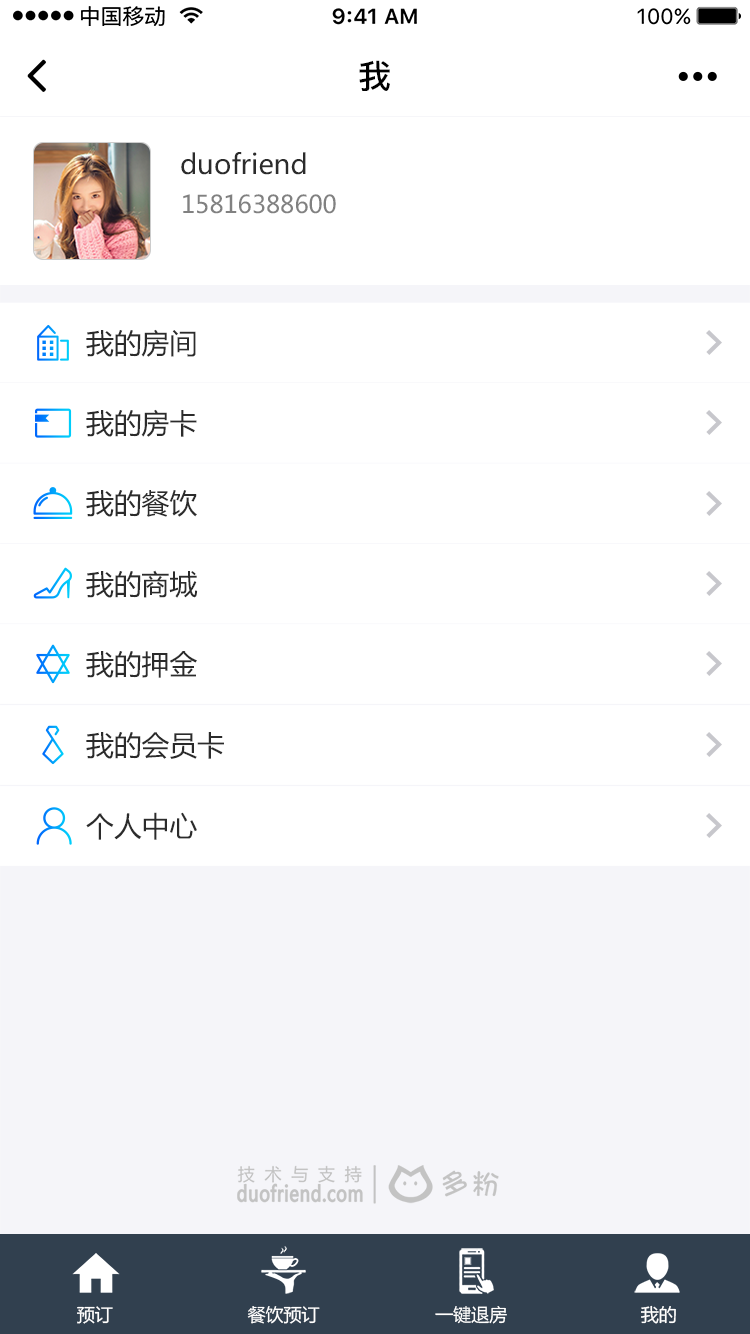
<style>
.page{position:relative;width:750px;height:1334px;background:#ffffff}
.page>*{position:absolute;margin:0}
.t1{font:33.2px "PingFang-SC-Bold";color:#000000}
.t2{font:27.2px "MicrosoftYaHei";color:#2b2b2b}
.t3{font:24.2px "MicrosoftYaHei";color:#818181}
.t4{font:27.8px "MicrosoftYaHei";color:#2b2b2b}
.t5{font:18px "MicrosoftYaHei";color:#ffffff}
</style>
<div class="page">
<p class="t1" style="left:359px;top:60px;width:31px;height:31px">我</p>
<p class="t2" style="left:181px;top:152px;width:125px;height:23px">duofriend</p>
<p class="t3" style="left:183px;top:194px;width:153px;height:20px">15816388600</p>
<p class="t4" style="left:86px;top:329px;width:110px;height:28px">我的房间</p>
<p class="t4" style="left:86px;top:409px;width:111px;height:28px">我的房卡</p>
<p class="t4" style="left:86px;top:490px;width:111px;height:27px">我的餐饮</p>
<p class="t4" style="left:86px;top:570px;width:112px;height:28px">我的商城</p>
<p class="t4" style="left:86px;top:651px;width:111px;height:27px">我的押金</p>
<p class="t4" style="left:86px;top:732px;width:138px;height:27px">我的会员卡</p>
<p class="t4" style="left:86px;top:812px;width:111px;height:28px">个人中心</p>
<p class="t5" style="left:77px;top:1306px;width:36px;height:18px">预订</p>
<p class="t5" style="left:247px;top:1306px;width:73px;height:18px">餐饮预订</p>
<p class="t5" style="left:435px;top:1306px;width:72px;height:18px">一键退房</p>
<p class="t5" style="left:641px;top:1305px;width:35px;height:19px">我的</p>
</div>
